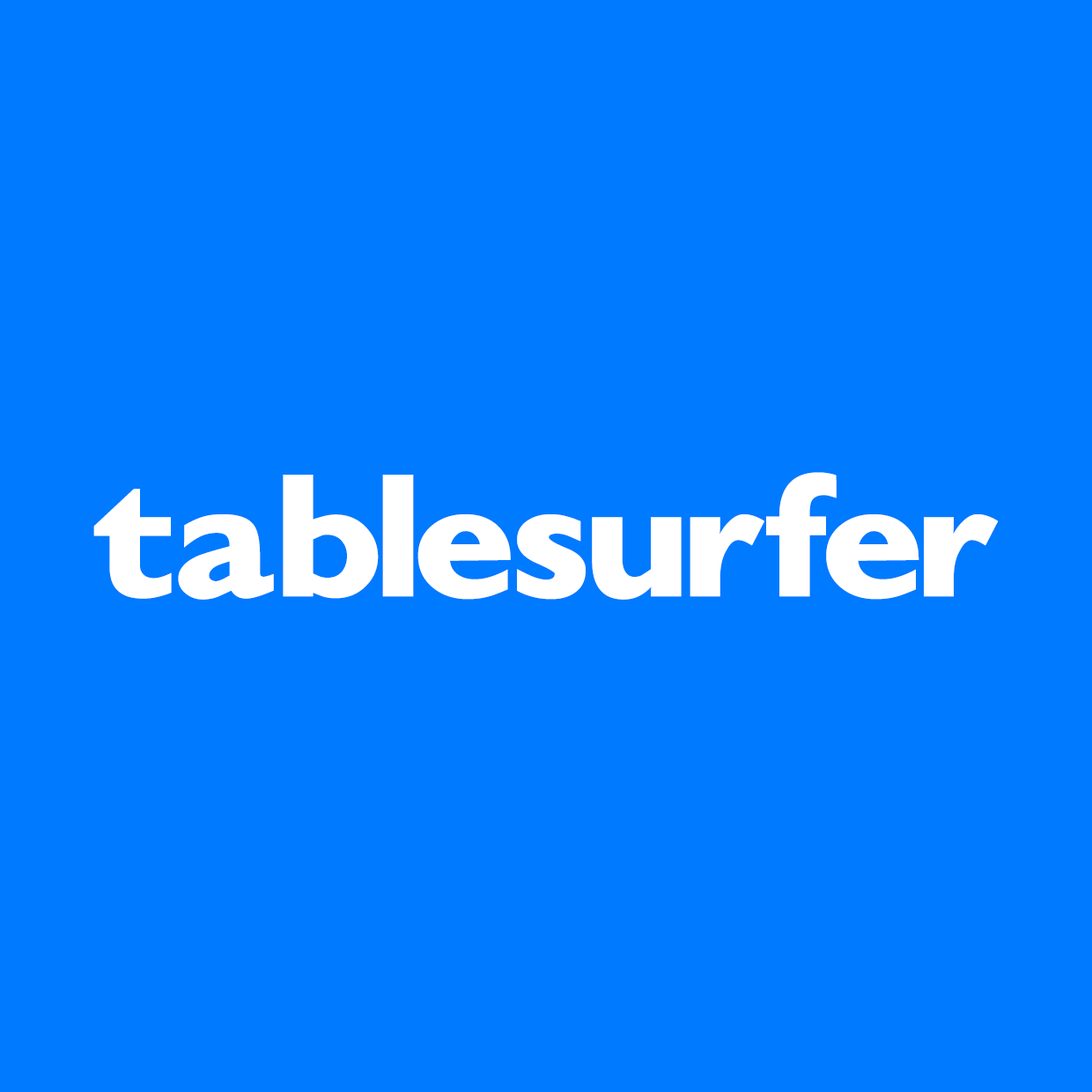
<style>
.page{position:relative;width:1092px;height:1092px;background:#007aff}
.page>*{position:absolute;margin:0}
.t1{font:172.2px "Gibson-Bold";letter-spacing:-0.065em;color:#ffffff;scale:1.09 1}
.t2{font:172.2px "Gibson-Bold";letter-spacing:0.045em;color:#ffffff;scale:1.09 1}
.t3{font:172.2px "Gibson-Bold";letter-spacing:-0.01em;color:#ffffff;scale:1.09 1}
.t4{font:172.2px "Gibson-Bold";letter-spacing:-0.09em;color:#ffffff;scale:1.09 1}
.t5{font:172.2px "Gibson-Bold";letter-spacing:-0.05em;color:#ffffff;scale:1.09 1}
.t6{font:172.2px "Gibson-Bold";letter-spacing:-0.015em;color:#ffffff;scale:1.09 1}
.t7{font:172.2px "Gibson-Bold";letter-spacing:-0.04em;color:#ffffff;scale:1.09 1}
.t8{font:172.2px "Gibson-Bold";letter-spacing:-0.07em;color:#ffffff;scale:1.09 1}
.t9{font:172.2px "Gibson-Bold";letter-spacing:0.03em;color:#ffffff;scale:1.09 1}
.t10{font:172.2px "Gibson-Bold";letter-spacing:-0.035em;color:#ffffff;scale:1.09 1}
</style>
<div class="page">
<p class="t1" style="left:93px;top:472px;width:906px;height:128px"><span class="t2">t</span><span class="t3">a</span><span class="t4">b</span><span class="t5">l</span><span class="t6">e</span><span class="t7">s</span><span class="t8">u</span><span class="t9">r</span><span class="t10">f</span>er</p>
</div>
